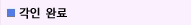
<style>
.page{position:relative;width:191px;height:25px;background:#fbf0fd}
.page>*{position:absolute;margin:0}
.t1{font:12px "NanumBarunGothicBold";color:#000000}
</style>
<div class="page">
<p class="t1" style="left:19px;top:7px;width:48px;height:12px">각인  완료</p>
</div>
